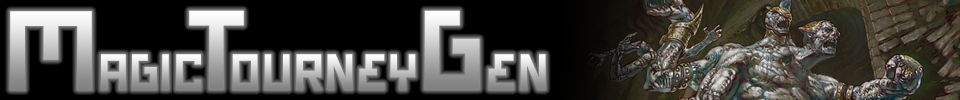
<style>
.page{position:relative;width:960px;height:100px;background:#000000}
.page>*{position:absolute;margin:0}
.t1{font:110px "BionicTypeBold"}
.t2{font:50px "BionicTypeBold";letter-spacing:0.1em}
</style>
<div class="page">
<p class="t1" style="left:10px;top:11px;width:82px;height:79px">M</p>
<p class="t1" style="left:189px;top:10px;width:55px;height:80px">T</p>
<p class="t1" style="left:424px;top:10px;width:56px;height:80px">G</p>
<p class="t2" style="left:101px;top:54px;width:100px;height:36px">agic</p>
<p class="t2" style="left:232px;top:54px;width:184px;height:36px">ourney</p>
<p class="t2" style="left:488px;top:54px;width:58px;height:36px">en</p>
</div>
